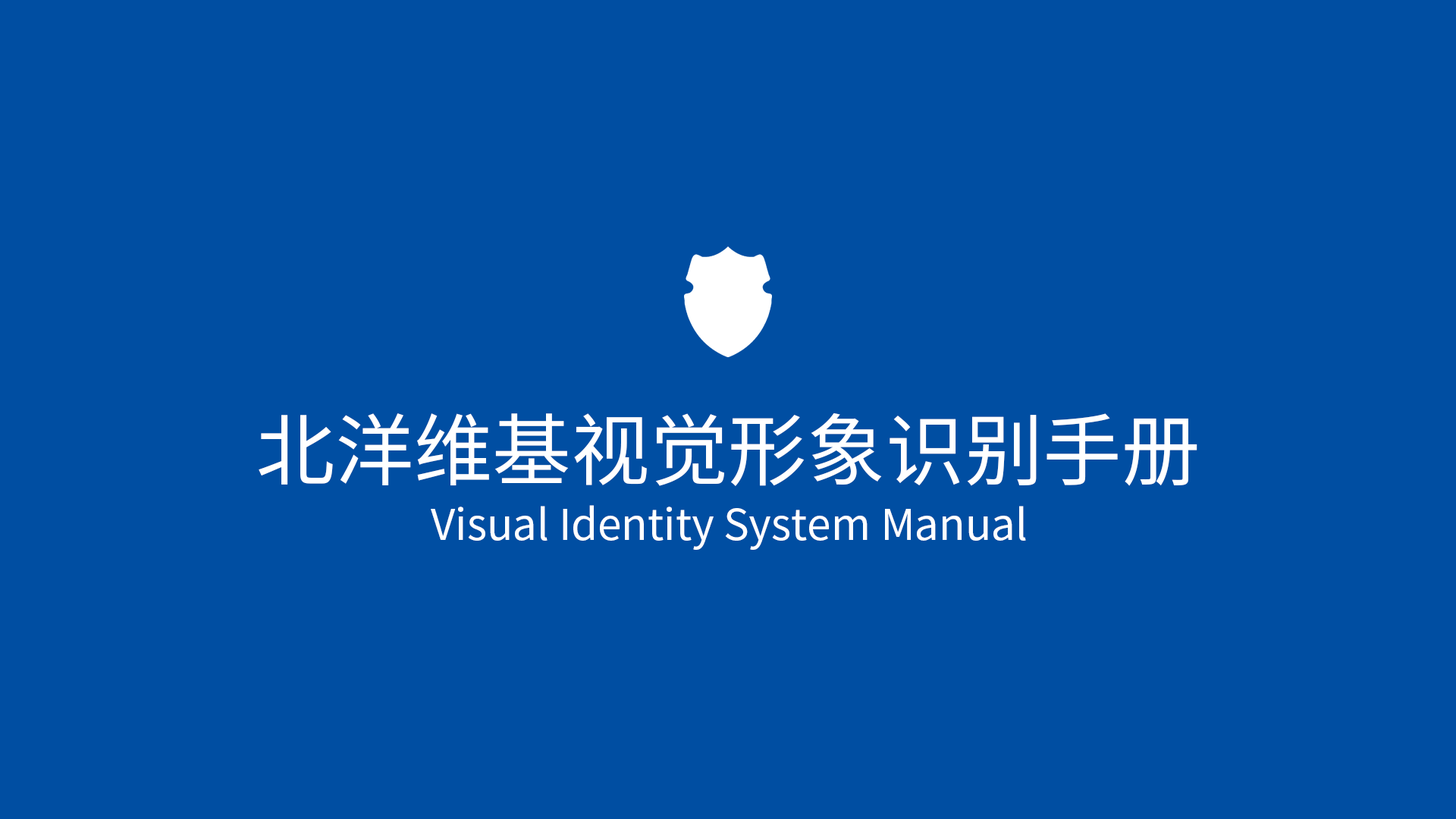
<style>
.page{position:relative;width:1456px;height:819px;background:#004ea2}
.page>*{position:absolute;margin:0}
.t1{font:78.6px "SourceHanSansCN-Regular";color:#ffffff}
.t2{font:42.8px "SourceHanSansCN-Regular";color:#ffffff}
</style>
<div class="page">
<p class="t1" style="left:259px;top:413px;width:938px;height:73px">北洋维基视觉形象识别手册</p>
<p class="t2" style="left:431px;top:505px;width:595px;height:45px">Visual Identity System Manual</p>
</div>
